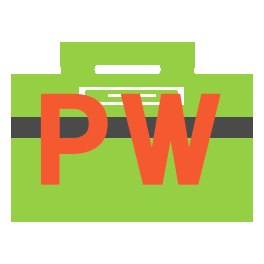
<style>
.page{position:relative;width:264px;height:264px;background:#ffffff}
.page>*{position:absolute;margin:0}
.t1{font:110.6px "HGSSoeiKakugothicUB";letter-spacing:0.03em;color:#f5592f;font-weight:bold;scale:1.27 1}
</style>
<div class="page">
<p class="t1" style="left:40px;top:93px;width:181px;height:92px">PW</p>
</div>
